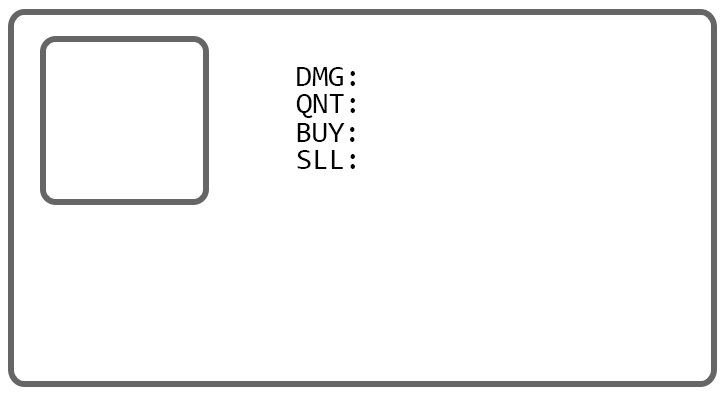
<style>
.page{position:relative;width:725px;height:395px;background:#ffffff}
.page>*{position:absolute;margin:0}
.t1{font:29.5px "Consolas";color:#000000}
</style>
<div class="page">
<p class="t1" style="left:297px;top:67px;width:58px;height:19px">DMG:</p>
<p class="t1" style="left:296px;top:94px;width:59px;height:24px">QNT:</p>
<p class="t1" style="left:297px;top:123px;width:58px;height:19px">BUY:</p>
<p class="t1" style="left:297px;top:150px;width:58px;height:19px">SLL:</p>
</div>
